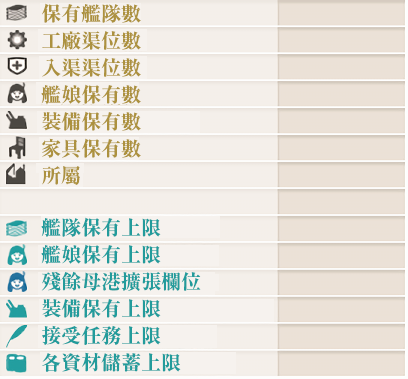
<style>
.page{position:relative;width:408px;height:379px}
.page>*{position:absolute;margin:0}
.t1{font:20px/27px "RyuminPr6N-ExBold";color:#ac923f}
.t2{font:20px/27px "RyuminPr6N-ExBold";color:#229b9b}
</style>
<div class="page">
<p class="t1" style="left:41px;top:3px;width:100px;height:182px">保有艦隊數<br>工廠渠位數<br>入渠渠位數<br>艦娘保有數<br>裝備保有數<br>家具保有數<br>所屬</p>
<p class="t2" style="left:41px;top:217px;width:160px;height:155px">艦隊保有上限<br>艦娘保有上限<br>殘餘母港擴張欄位<br>裝備保有上限<br>接受任務上限<br>各資材儲蓄上限</p>
</div>
